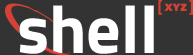
<style>
.page{position:relative;width:193px;height:55px;background:#333333}
.page>*{position:absolute;margin:0}
.t1{font:68px "TitilliumWeb-Bold";color:#ffffff}
</style>
<div class="page">
<p class="t1" style="left:19px;top:5px;width:135px;height:49px">shell</p>
</div>
